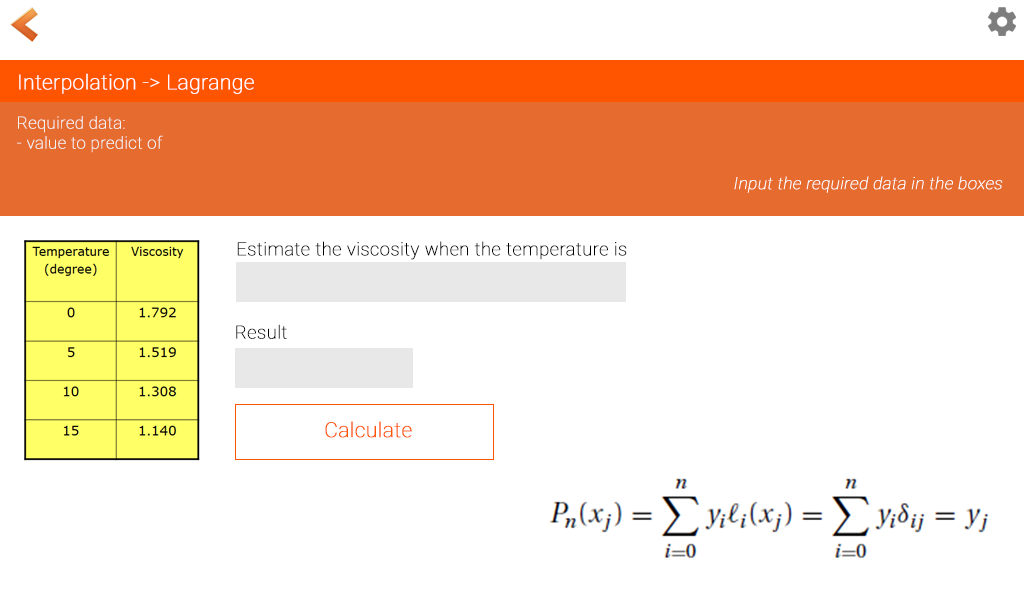
<style>
.page{position:relative;width:1024px;height:600px;background:#ffffff}
.page>*{position:absolute;margin:0}
.t1{font:20.8px "Roboto-Thin";color:#ffffff;font-weight:bold}
.t2{font:16.7px "Roboto-Thin";color:#f3f3f3;font-weight:bold}
.t3{font:16.7px "Roboto-Thin";color:#ffffff;font-weight:bold;font-style:italic}
.t4{font:18.3px "Roboto-Thin";color:#000000;font-weight:bold}
.t5{font:20.8px "Roboto-Thin";color:#ff5500;font-weight:bold}
</style>
<div class="page">
<p class="t1" style="left:19px;top:73px;width:235px;height:21px">Interpolation -&gt; Lagrange</p>
<p class="t2" style="left:17px;top:116px;width:146px;height:37px">Required data:<br>- value to predict of</p>
<p class="t3" style="left:734px;top:176px;width:269px;height:17px">Input the required data in the boxes</p>
<p class="t4" style="left:237px;top:241px;width:390px;height:19px">Estimate the viscosity when the temperature is</p>
<p class="t4" style="left:236px;top:324px;width:51px;height:15px">Result</p>
<p class="t5" style="left:325px;top:421px;width:87px;height:17px">Calculate</p>
</div>
